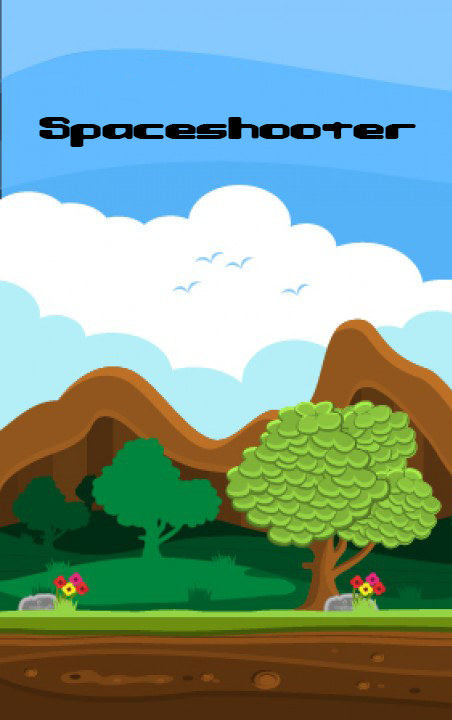
<style>
.page{position:relative;width:452px;height:720px}
.page>*{position:absolute;margin:0}
.t1{font:33.3px "MacropsiaBRK";color:#000000}
</style>
<div class="page">
<p class="t1" style="left:39px;top:117px;width:377px;height:30px">Spaceshooter</p>
</div>
